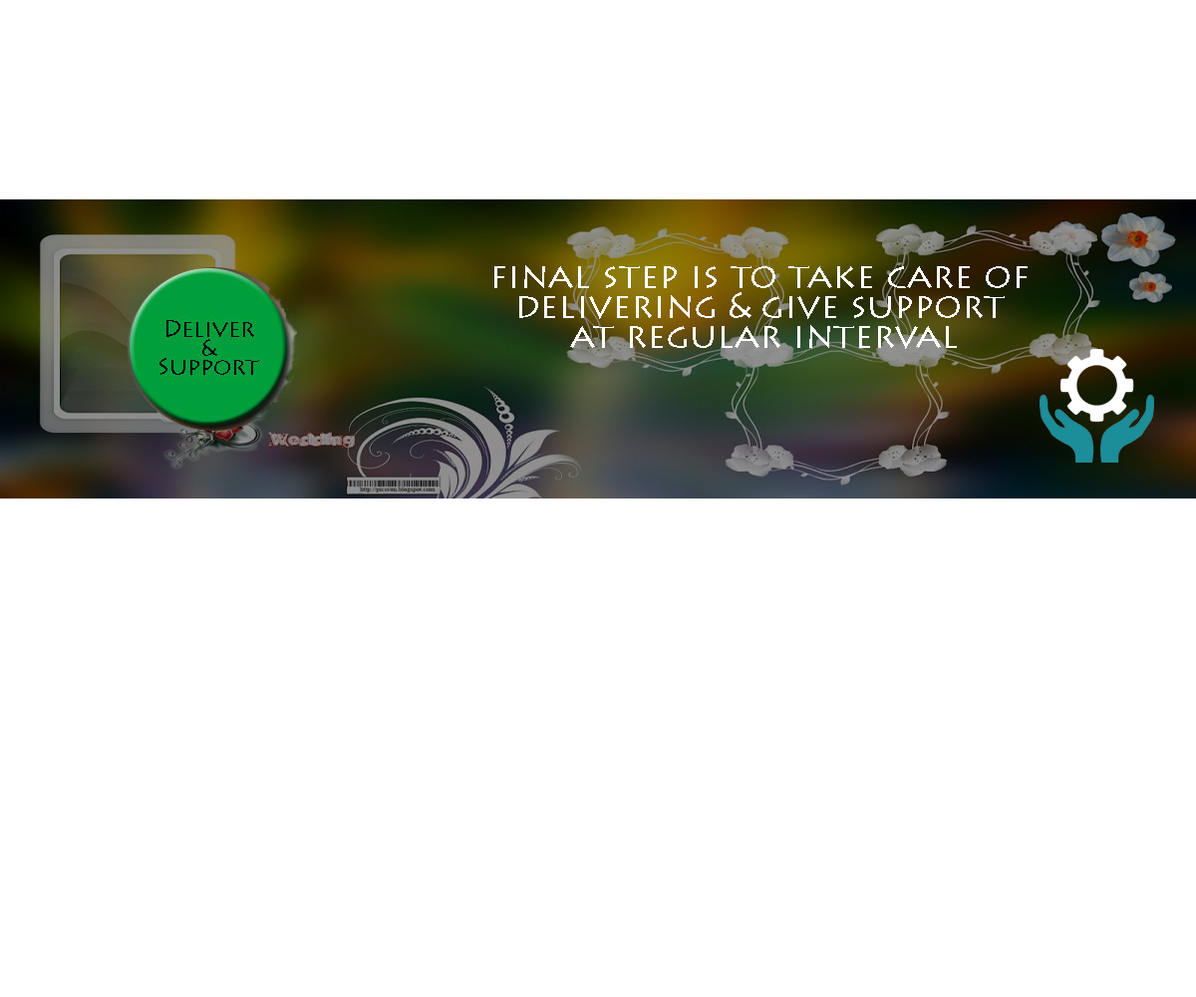
<style>
.page{position:relative;width:1196px;height:997px;background:#ffffff}
.page>*{position:absolute;margin:0}
.t1{font:35.9px/29.9px "LithosPro-Regular";color:#ffffff}
</style>
<div class="page">
<p class="t1" style="left:494px;top:265px;width:534px;height:84px;text-align:center">final step is to take care of <br>delivering &amp; give support <br>at regular interval</p>
</div>
